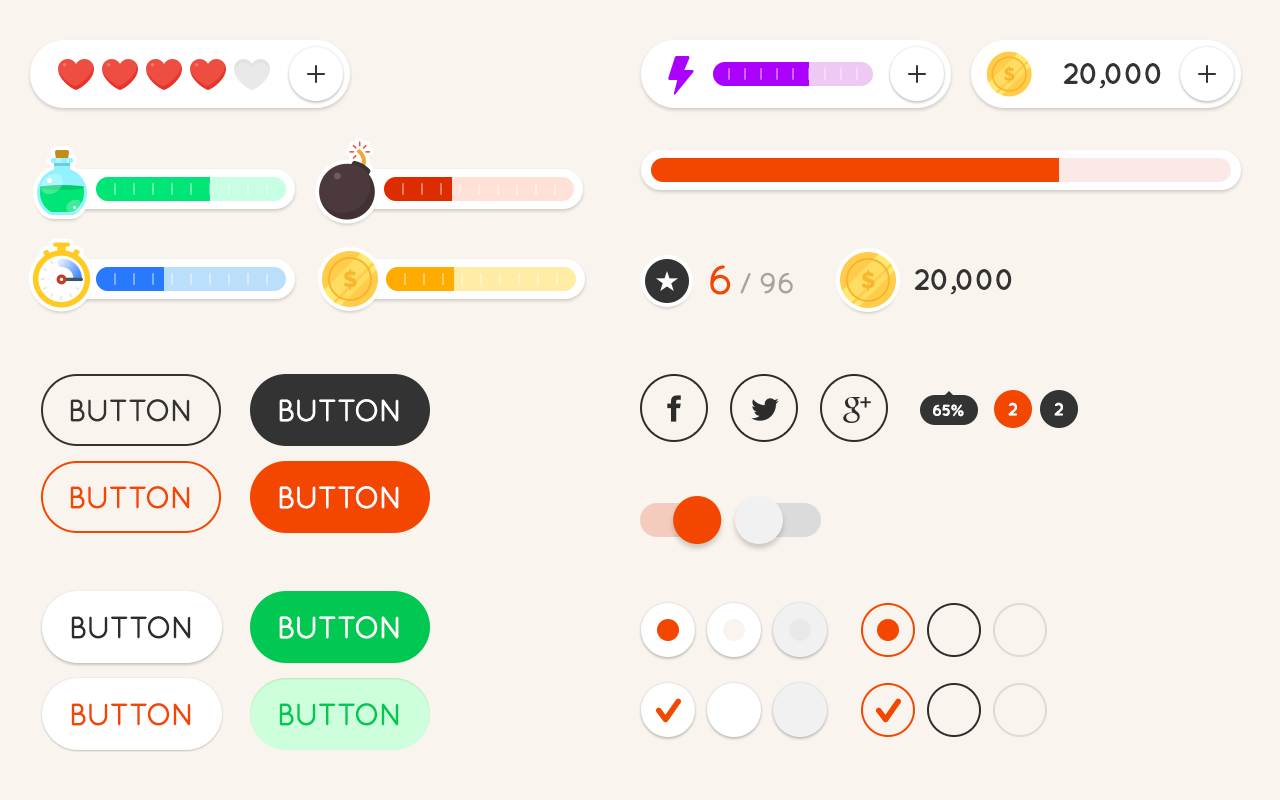
<style>
.page{position:relative;width:1280px;height:800px;background:#f9f4ed}
.page>*{position:absolute;margin:0}
.t1{font:30px "QuicksandBold-Regular";letter-spacing:-0.05em;color:#333333;text-transform:uppercase}
.t2{font:40px "QuicksandBook-Regular";letter-spacing:-0.025em;color:#f34600;text-transform:uppercase;font-weight:bold}
.t3{font:28px "QuicksandBook-Regular";letter-spacing:-0.025em;color:#a7a4a0;text-transform:uppercase;font-weight:bold}
.t4{font:30px "QuicksandBook-Regular";letter-spacing:-0.05em;color:#333333;text-transform:uppercase;font-weight:bold}
.t5{font:30px "QuicksandBook-Regular";letter-spacing:-0.05em;color:#ffffff;text-transform:uppercase;font-weight:bold}
.t6{font:16px "QuicksandBold-Regular";letter-spacing:-0.05em;color:#ffffff;text-transform:uppercase}
.t7{font:18px "QuicksandBold-Regular";letter-spacing:0.04em;color:#ffffff}
.t8{font:30px "QuicksandBook-Regular";letter-spacing:-0.05em;color:#f34600;text-transform:uppercase;font-weight:bold}
.t9{font:30px "QuicksandBook-Regular";letter-spacing:-0.05em;color:#2c2c2c;text-transform:uppercase;font-weight:bold}
.t10{font:30px "QuicksandBook-Regular";letter-spacing:-0.05em;color:#00c853;text-transform:uppercase;font-weight:bold}
</style>
<div class="page">
<p class="t1" style="left:1063px;top:63px;width:98px;height:26px">20,000</p>
<p class="t2" style="left:710px;top:265px;width:21px;height:30px">6</p>
<p class="t1" style="left:914px;top:269px;width:98px;height:26px">20,000</p>
<p class="t3" style="left:740px;top:272px;width:53px;height:22px">/ 96</p>
<p class="t4" style="left:70px;top:399px;width:120px;height:23px">Button</p>
<p class="t5" style="left:279px;top:399px;width:120px;height:23px">Button</p>
<p class="t6" style="left:933px;top:404px;width:31px;height:13px">65%</p>
<p class="t7" style="left:1008px;top:402px;width:9px;height:14px">2</p>
<p class="t7" style="left:1054px;top:402px;width:9px;height:14px">2</p>
<p class="t8" style="left:70px;top:486px;width:120px;height:23px">Button</p>
<p class="t5" style="left:279px;top:486px;width:120px;height:23px">Button</p>
<p class="t9" style="left:71px;top:616px;width:120px;height:23px">Button</p>
<p class="t5" style="left:279px;top:616px;width:120px;height:23px">Button</p>
<p class="t8" style="left:71px;top:703px;width:120px;height:23px">Button</p>
<p class="t10" style="left:279px;top:703px;width:120px;height:23px">Button</p>
</div>
